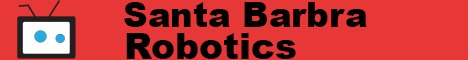
<style>
.page{position:relative;width:468px;height:60px;background:#e73737}
.page>*{position:absolute;margin:0}
.t1{font:34px "Arial-Black";color:#000000}
.t2{font:36px "Arial-Black";color:#000000}
</style>
<div class="page">
<p class="t1" style="left:124px;top:2px;width:243px;height:25px">Santa Barbra</p>
<p class="t2" style="left:126px;top:33px;width:170px;height:26px">Robotics</p>
</div>
